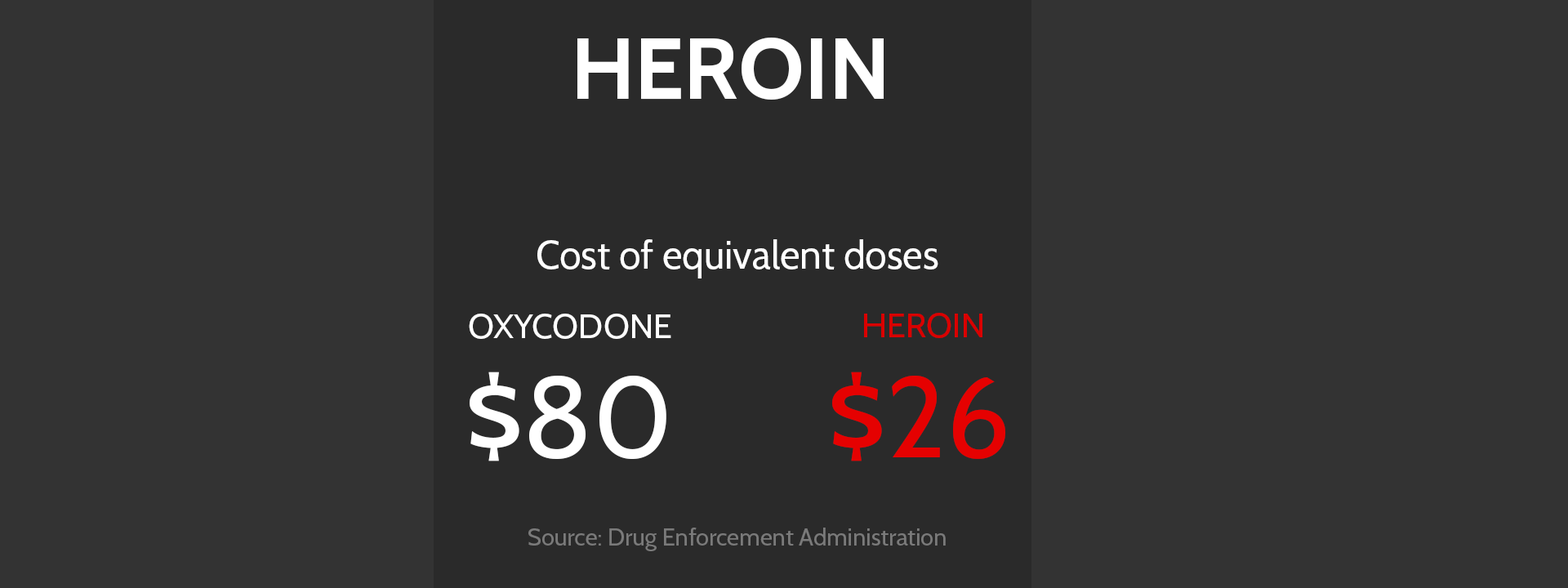
<style>
.page{position:relative;width:1568px;height:588px;background:#333333}
.page>*{position:absolute;margin:0}
.t1{font:86.8px "Cabin-Bold";color:#ffffff}
.t2{font:39.1px "Cabin-Regular";color:#ffffff}
.t3{font:34px "Cabin-Regular";color:#ffffff}
.t4{font:34px "Cabin-Regular";color:#da0000}
.t5{font:114px "Cabin-Regular";color:#ffffff}
.t6{font:114px "Cabin-Regular";color:#e50101}
.t7{font:23.8px "Cabin-Regular";color:#7a7a7a}
</style>
<div class="page">
<p class="t1" style="left:577px;top:38px;width:307px;height:62px">HEROIN</p>
<p class="t2" style="left:537px;top:239px;width:401px;height:39px">Cost of equivalent doses</p>
<p class="t3" style="left:469px;top:314px;width:202px;height:25px">OXYCODONE</p>
<p class="t4" style="left:864px;top:313px;width:118px;height:25px">HEROIN</p>
<p class="t5" style="left:470px;top:372px;width:535px;height:89px">$80      <span class="t6">$26</span></p>
<p class="t7" style="left:528px;top:528px;width:418px;height:23px">Source: Drug Enforcement Administration</p>
</div>
